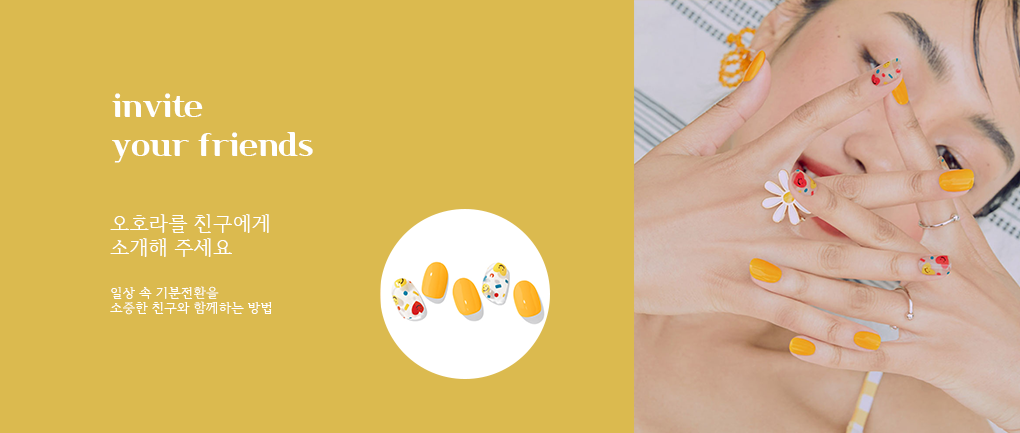
<style>
.page{position:relative;width:1020px;height:433px;background:#dbba4f}
.page>*{position:absolute;margin:0}
.t1{font:32px "Cafe24Danjunghae";color:#ffffff}
.t2{font:20px "HCRBatang";color:#ffffff}
.t3{font:13px "HCRBatang";color:#ffffff}
</style>
<div class="page">
<p class="t1" style="left:112px;top:93px;width:201px;height:70px">invite<br>your friends</p>
<p class="t2" style="left:110px;top:214px;width:159px;height:43px">오호라를 친구에게<br>소개해 주세요</p>
<p class="t3" style="left:110px;top:286px;width:162px;height:29px">일상 속 기분전환을<br>소중한 친구와 함께하는 방법</p>
</div>
